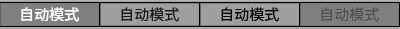
<style>
.page{position:relative;width:400px;height:29px;background:#7f7f7f}
.page>*{position:absolute;margin:0}
.t1{font:15px "SourceHanSansSC-Normal";color:#ffffff}
.t2{font:15px "SourceHanSansSC-Normal";color:#191919}
.t3{font:15px "SourceHanSansSC-Normal";color:#000000}
.t4{font:15px "SourceHanSansSC-Normal";color:#505050}
</style>
<div class="page">
<p class="t1" style="left:21px;top:7px;width:58px;height:15px">自动模式</p>
<p class="t2" style="left:121px;top:7px;width:58px;height:15px">自动模式</p>
<p class="t3" style="left:221px;top:7px;width:58px;height:15px">自动模式</p>
<p class="t4" style="left:321px;top:7px;width:58px;height:15px">自动模式</p>
</div>
